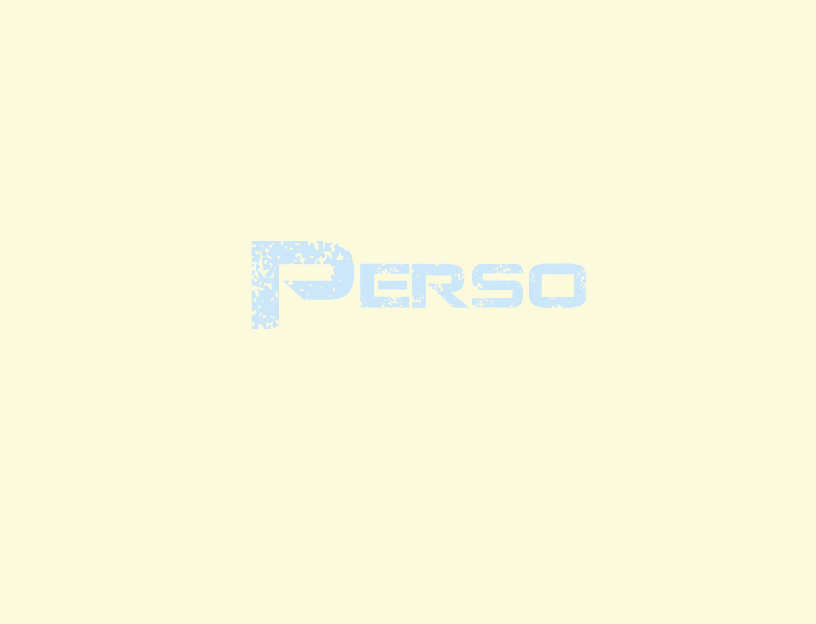
<style>
.page{position:relative;width:816px;height:624px;background:#fbfadc}
.page>*{position:absolute;margin:0}
.t1{font:125px "JacintoSans";color:#cce6fa}
</style>
<div class="page">
<p class="t1" style="left:251px;top:241px;width:335px;height:88px">Perso</p>
</div>
